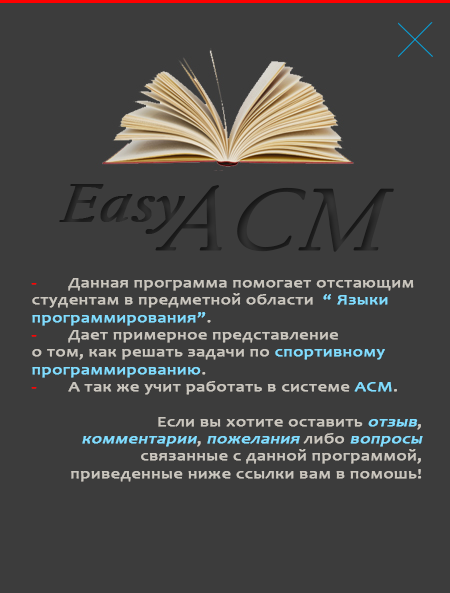
<style>
.page{position:relative;width:450px;height:593px;background:#3c3c3c}
.page>*{position:absolute;margin:0}
.t1{font:56.1px "CalifornianFB-Italic";color:#202020;font-weight:bold;font-style:italic;scale:1.21 1}
.t2{font:92.3px "CalifornianFB-Italic";color:#373737;font-weight:bold;font-style:italic;scale:1.21 1}
.t3{font:14.4px "Candara";color:#cac6be;font-weight:bold;scale:1.27 1}
.t4{font:14.4px "Candara";color:#ff0000;font-weight:bold;scale:1.27 1}
.t5{font:14.4px "Candara";color:#81ddff;font-weight:bold;scale:1.27 1}
.t6{font:14.4px "Candara";color:#81ddff;font-weight:bold;font-style:italic;scale:1.27 1}
</style>
<div class="page">
<p class="t1" style="left:59px;top:184px;width:126px;height:50px">Easy</p>
<p class="t2" style="left:155px;top:185px;width:239px;height:67px">ACM</p>
<p class="t3" style="left:31px;top:278px;width:392px;height:204px"><span class="t4">-</span> Данная программа помогает отстающим <br>студентам в предметной области  <span class="t5">“ Языки <br>программирования”</span>.<br><span class="t4">-</span> Дает примерное представление <br>о том, как решать задачи по <span class="t5">спортивному <br>программированию</span>.<br><span class="t4">-</span>  А так же учит работать в системе <span class="t5">АСМ</span>.<br><br> Если вы хотите оставить <span class="t6">отзыв</span>, <span class="t6">комментарии</span>, <span class="t6">пожелания </span>либо <span class="t6">вопросы</span> связанные с данной программой, приведенные ниже ссылки вам в помошь!</p>
</div>
